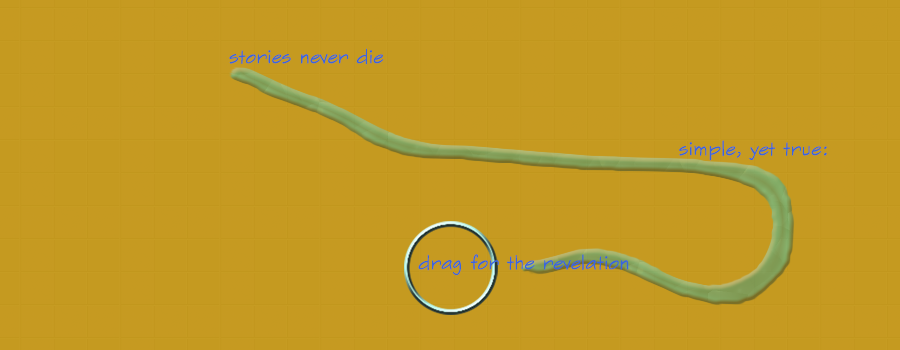
<style>
.page{position:relative;width:900px;height:350px;background:#c69a21}
.page>*{position:absolute;margin:0}
.t1{font:18px "SketchFlowPrint";color:#3965de}
</style>
<div class="page">
<p class="t1" style="left:229px;top:48px;width:155px;height:17px">stories never die</p>
<p class="t1" style="left:679px;top:140px;width:148px;height:21px">simple, yet true:</p>
<p class="t1" style="left:418px;top:254px;width:211px;height:22px">drag for the revelation</p>
</div>
